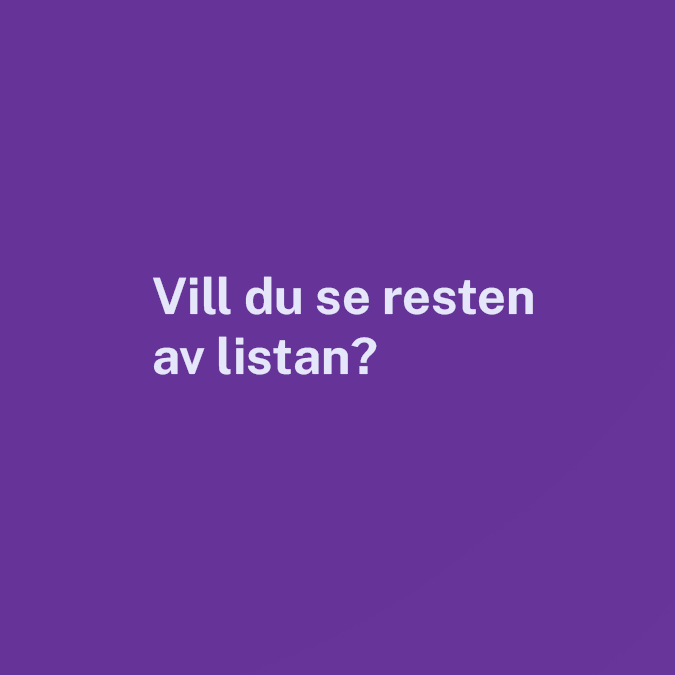
<style>
.page{position:relative;width:675px;height:675px;background:#663399}
.page>*{position:absolute;margin:0}
.t1{font:50px "PublicSansRoman-Bold";color:#e6e6fa}
</style>
<div class="page">
<p class="t1" style="left:153px;top:276px;width:380px;height:99px">Vill du se resten av listan?</p>
</div>
